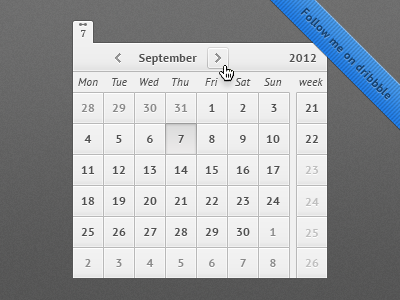
<style>
.page{position:relative;width:400px;height:300px}
.page>*{position:absolute;margin:0}
.t1{font:10px "PTSerif-Bold";color:#505050}
.t2{font:12px "PTSans-Bold";letter-spacing:0.025em;color:#505050}
.t3{font:11px "PTSans-Italic";letter-spacing:0.025em;color:#505050}
.t4{font:12px "PTSans-Bold";letter-spacing:0.025em;color:#8a8a8a}
.t5{font:12px "PTSans-Bold";letter-spacing:0.025em;color:#bfbfbf}
</style>
<div class="page">
<p class="t1" style="left:81px;top:30px;width:5px;height:7px">7</p>
<p class="t2" style="left:139px;top:54px;width:58px;height:11px">September</p>
<p class="t2" style="left:289px;top:54px;width:27px;height:8px">2012</p>
<p class="t3" style="left:78px;top:78px;width:20px;height:8px">Mon</p>
<p class="t3" style="left:112px;top:78px;width:15px;height:8px">Tue</p>
<p class="t3" style="left:140px;top:78px;width:19px;height:8px">Wed</p>
<p class="t3" style="left:172px;top:78px;width:17px;height:8px">Thu</p>
<p class="t3" style="left:205px;top:78px;width:13px;height:8px">Fri</p>
<p class="t3" style="left:235px;top:78px;width:16px;height:8px">Sat</p>
<p class="t3" style="left:264px;top:78px;width:18px;height:8px">Sun</p>
<p class="t3" style="left:299px;top:78px;width:24px;height:8px">week</p>
<p class="t4" style="left:81px;top:104px;width:14px;height:8px">28</p>
<p class="t4" style="left:112px;top:104px;width:14px;height:8px">29</p>
<p class="t4" style="left:143px;top:104px;width:14px;height:8px">30</p>
<p class="t4" style="left:174px;top:104px;width:14px;height:8px">31</p>
<p class="t2" style="left:209px;top:104px;width:6px;height:8px">1</p>
<p class="t2" style="left:240px;top:104px;width:6px;height:8px">2</p>
<p class="t2" style="left:271px;top:104px;width:6px;height:8px">3</p>
<p class="t2" style="left:305px;top:104px;width:14px;height:8px">21</p>
<p class="t2" style="left:84px;top:135px;width:8px;height:8px">4</p>
<p class="t2" style="left:116px;top:135px;width:6px;height:8px">5</p>
<p class="t2" style="left:147px;top:135px;width:6px;height:8px">6</p>
<p class="t2" style="left:178px;top:135px;width:6px;height:8px">7</p>
<p class="t2" style="left:209px;top:135px;width:6px;height:8px">8</p>
<p class="t2" style="left:240px;top:135px;width:6px;height:8px">9</p>
<p class="t2" style="left:266px;top:135px;width:14px;height:8px">10</p>
<p class="t2" style="left:305px;top:135px;width:13px;height:8px">22</p>
<p class="t2" style="left:81px;top:166px;width:14px;height:8px">11</p>
<p class="t2" style="left:112px;top:166px;width:13px;height:8px">12</p>
<p class="t2" style="left:143px;top:166px;width:14px;height:8px">13</p>
<p class="t2" style="left:174px;top:166px;width:14px;height:8px">14</p>
<p class="t2" style="left:205px;top:166px;width:13px;height:8px">15</p>
<p class="t2" style="left:236px;top:166px;width:14px;height:8px">16</p>
<p class="t2" style="left:267px;top:166px;width:13px;height:8px">17</p>
<p class="t5" style="left:305px;top:166px;width:14px;height:8px">23</p>
<p class="t2" style="left:81px;top:197px;width:14px;height:8px">18</p>
<p class="t2" style="left:112px;top:197px;width:14px;height:8px">19</p>
<p class="t2" style="left:143px;top:197px;width:14px;height:8px">20</p>
<p class="t2" style="left:174px;top:197px;width:14px;height:8px">21</p>
<p class="t2" style="left:205px;top:197px;width:13px;height:8px">22</p>
<p class="t2" style="left:236px;top:197px;width:14px;height:8px">23</p>
<p class="t2" style="left:266px;top:197px;width:14px;height:8px">24</p>
<p class="t5" style="left:305px;top:198px;width:14px;height:8px">24</p>
<p class="t2" style="left:81px;top:228px;width:13px;height:8px">25</p>
<p class="t2" style="left:112px;top:228px;width:14px;height:8px">26</p>
<p class="t2" style="left:144px;top:228px;width:13px;height:8px">27</p>
<p class="t2" style="left:174px;top:228px;width:14px;height:8px">28</p>
<p class="t2" style="left:205px;top:228px;width:14px;height:8px">29</p>
<p class="t2" style="left:236px;top:228px;width:14px;height:8px">30</p>
<p class="t4" style="left:270px;top:228px;width:6px;height:8px">1</p>
<p class="t5" style="left:305px;top:229px;width:13px;height:8px">25</p>
<p class="t4" style="left:85px;top:259px;width:6px;height:8px">2</p>
<p class="t4" style="left:116px;top:259px;width:6px;height:8px">3</p>
<p class="t4" style="left:146px;top:259px;width:8px;height:8px">4</p>
<p class="t4" style="left:178px;top:259px;width:6px;height:8px">5</p>
<p class="t4" style="left:209px;top:259px;width:6px;height:8px">6</p>
<p class="t4" style="left:240px;top:259px;width:6px;height:8px">7</p>
<p class="t4" style="left:270px;top:259px;width:6px;height:8px">8</p>
<p class="t5" style="left:305px;top:259px;width:14px;height:8px">26</p>
</div>
